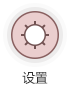
<style>
.page{position:relative;width:70px;height:94px;background:#ffffff}
.page>*{position:absolute;margin:0}
.t1{font:13px "MicrosoftYaHei";color:#323232}
</style>
<div class="page">
<p class="t1" style="left:22px;top:71px;width:26px;height:13px">设置</p>
</div>
